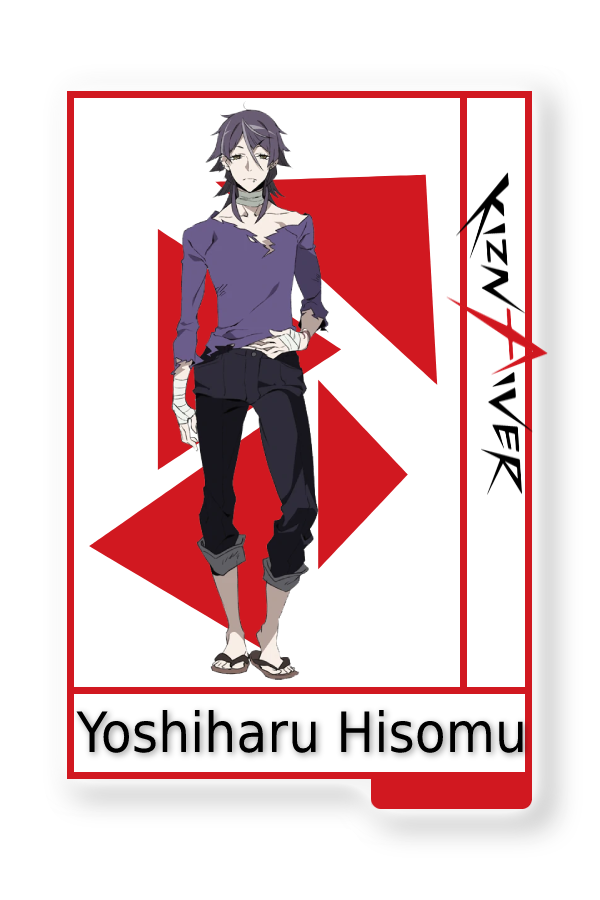
<style>
.page{position:relative;width:600px;height:900px;background:#ffffff}
.page>*{position:absolute;margin:0}
.t1{font:55.4px "CoolveticaRg-Regular";color:#000000;scale:0.91 1}
</style>
<div class="page">
<p class="t1" style="left:76px;top:710px;width:447px;height:43px">Yoshiharu Hisomu</p>
</div>
